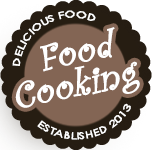
<style>
.page{position:relative;width:152px;height:150px;background:#836554}
.page>*{position:absolute;margin:0}
.t1{font:10px "CenturyGothic";color:#ffffff}
.t2{font:38px/33px "CurlzMT";color:#ffffff;font-weight:bold}
</style>
<div class="page">
<p class="t1" style="left:12px;top:10px;width:84px;height:56px;rotate:-30deg">DELICIOUS FOOD</p>
<p class="t2" style="left:15px;top:27px;width:125px;height:81px;text-align:center;rotate:-11deg">Food<br>Cooking</p>
<p class="t1" style="left:37px;top:103px;width:94px;height:37px;rotate:-11deg">ESTABLISHED 2013</p>
</div>
